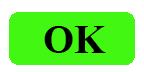
<style>
.page{position:relative;width:144px;height:72px;background:#42f711}
.page>*{position:absolute;margin:0}
.t1{font:40px "TimesNewRomanPS-BoldMT";color:#000000}
</style>
<div class="page">
<p class="t1" style="left:44px;top:26px;width:62px;height:27px">OK</p>
</div>
